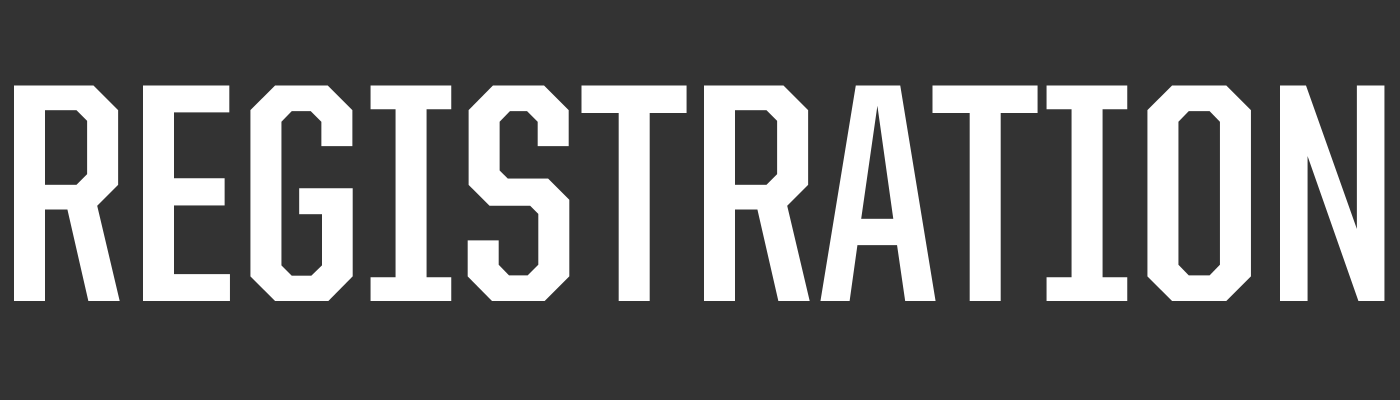
<style>
.page{position:relative;width:1400px;height:400px;background:#333333}
.page>*{position:absolute;margin:0}
.t1{font:312.3px "UnitedSansCond-Bold";color:#ffffff}
</style>
<div class="page">
<p class="t1" style="left:14px;top:85px;width:1371px;height:216px">REGISTRATION</p>
</div>
